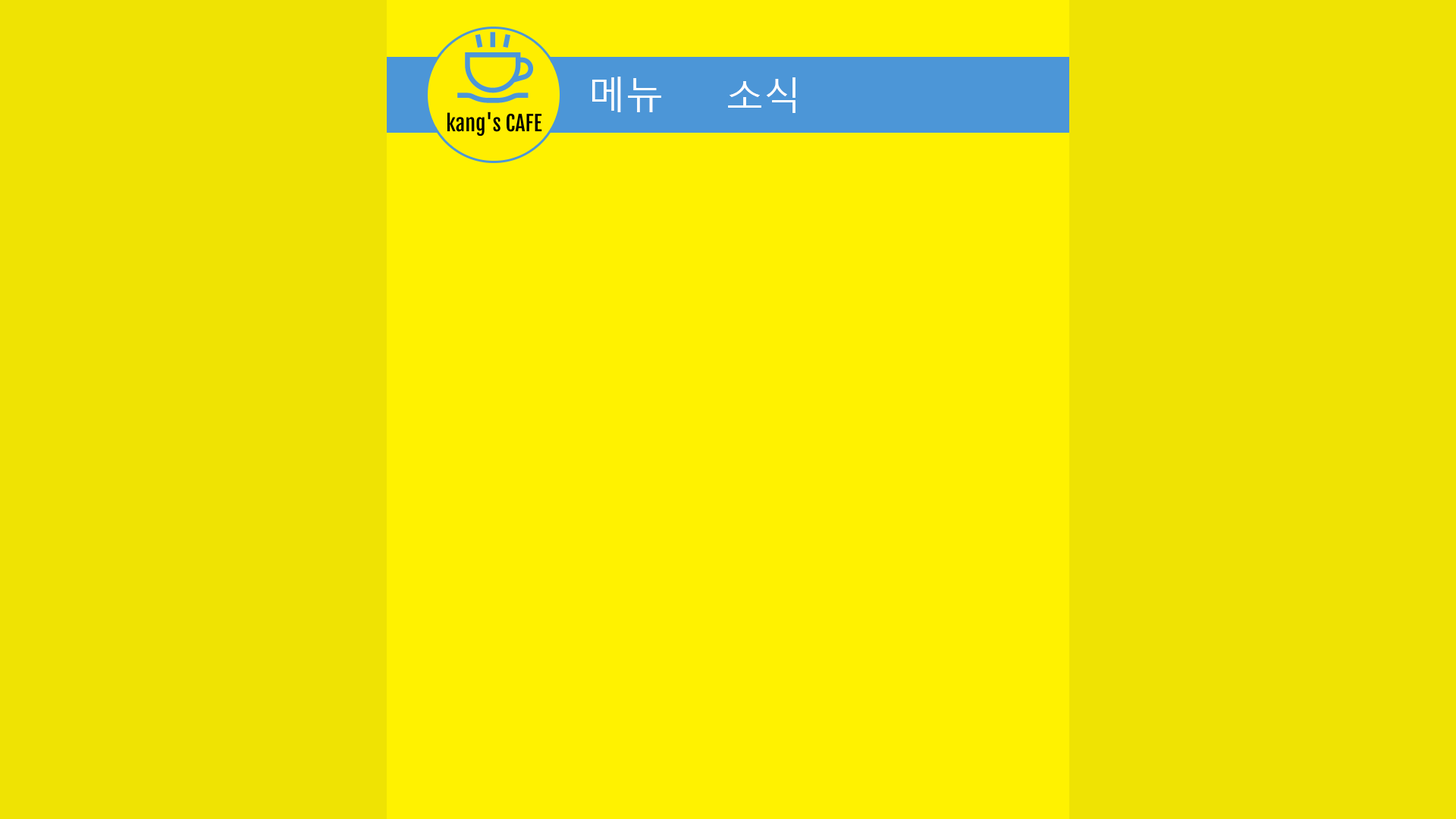
<style>
.page{position:relative;width:1456px;height:819px;background:#efe303}
.page>*{position:absolute;margin:0}
.t1{font:37.9px "MalgunGothic";color:#ffffff}
</style>
<div class="page">
<p class="t1" style="left:592px;top:77px;width:69px;height:35px">메뉴</p>
<p class="t1" style="left:728px;top:77px;width:67px;height:36px">소식</p>
</div>
